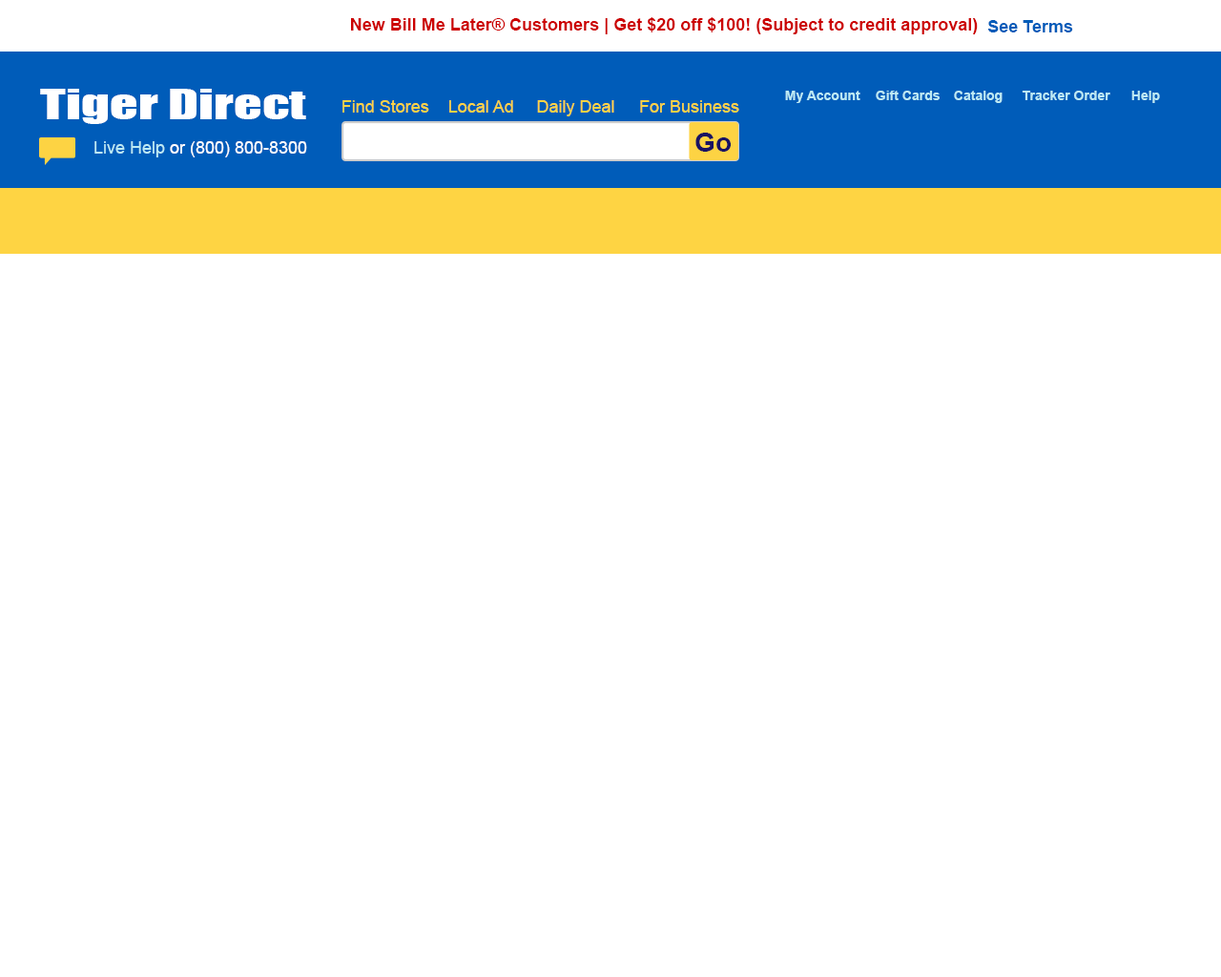
<style>
.page{position:relative;width:1221px;height:977px;background:#ffffff}
.page>*{position:absolute;margin:0}
.t1{font:17.2px "Arial-BoldMT";color:#cc0000}
.t2{font:17.2px "Arial-BoldMT";color:#005cb9}
.t3{font:38.2px "Impact";letter-spacing:0.001em;color:#ffffff;scale:1.45 1}
.t4{font:17.2px "ArialMT";color:#fed443}
.t5{font:13.4px "Arial-BoldMT";color:#bceaf4}
.t6{font:26.7px "Arial-BoldMT";color:#191362}
.t7{font:17.2px "ArialMT";color:#ffffff}
.t8{font:17.2px "ArialMT";color:#bceaf4}
</style>
<div class="page">
<p class="t1" style="left:351px;top:17px;width:627px;height:17px">New Bill Me Later® Customers | Get $20 off $100! (Subject to credit approval)</p>
<p class="t2" style="left:987px;top:20px;width:86px;height:12px">See Terms</p>
<p class="t3" style="left:40px;top:89px;width:266px;height:35px">Tiger Direct</p>
<p class="t4" style="left:342px;top:100px;width:87px;height:13px">Find Stores</p>
<p class="t4" style="left:449px;top:100px;width:64px;height:13px">Local Ad</p>
<p class="t4" style="left:537px;top:100px;width:77px;height:16px">Daily Deal</p>
<p class="t4" style="left:640px;top:100px;width:99px;height:13px">For Business</p>
<p class="t5" style="left:785px;top:91px;width:75px;height:12px">My Account</p>
<p class="t5" style="left:876px;top:91px;width:64px;height:9px">Gift Cards</p>
<p class="t5" style="left:954px;top:91px;width:48px;height:12px">Catalog</p>
<p class="t5" style="left:1022px;top:91px;width:88px;height:9px">Tracker Order</p>
<p class="t5" style="left:1131px;top:91px;width:29px;height:12px">Help</p>
<p class="t6" style="left:695px;top:133px;width:36px;height:19px">Go</p>
<p class="t7" style="left:94px;top:141px;width:213px;height:16px"><span class="t8">Live Help</span> or (800) 800-8300</p>
</div>
